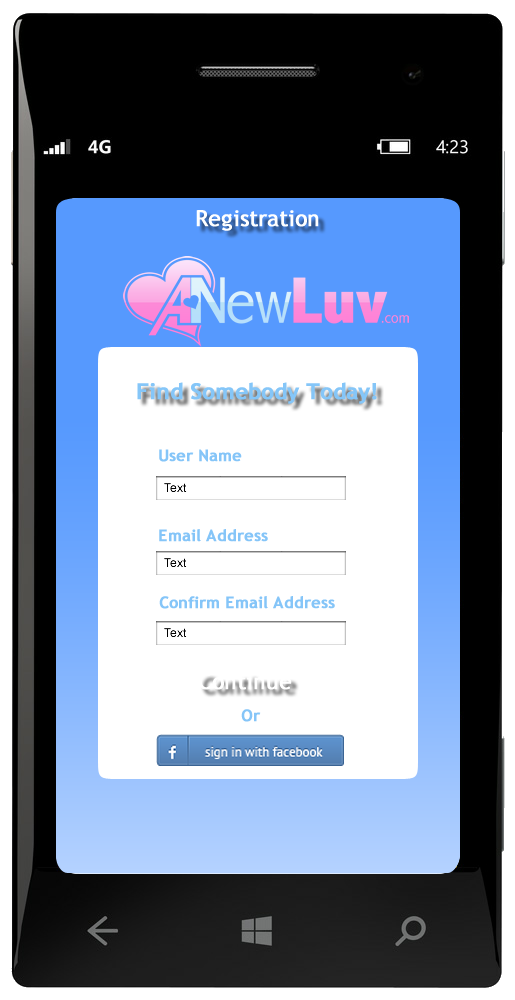
<style>
.page{position:relative;width:515px;height:1000px;background:#ffffff}
.page>*{position:absolute;margin:0}
.t1{font:22px "TrebuchetMS";color:#ffffff;font-weight:bold}
.t2{font:22px "TrebuchetMS-Bold";color:#85c6f8;font-weight:bold}
.t3{font:16px "TrebuchetMS-Bold";color:#85c5f8;font-weight:bold}
</style>
<div class="page">
<p class="t1" style="left:196px;top:210px;width:123px;height:21px">Registration</p>
<p class="t2" style="left:137px;top:382px;width:240px;height:22px">Find Somebody Today!</p>
<p class="t3" style="left:159px;top:449px;width:83px;height:13px">User Name</p>
<p class="t3" style="left:159px;top:529px;width:109px;height:13px">Email Address</p>
<p class="t3" style="left:159px;top:596px;width:176px;height:13px">Confirm Email Address</p>
<p class="t1" style="left:198px;top:673px;width:94px;height:17px">Continue</p>
<p class="t3" style="left:241px;top:709px;width:20px;height:13px">Or</p>
</div>
